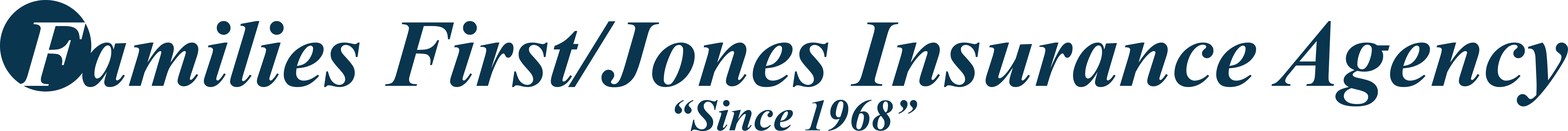
<style>
.page{position:relative;width:1568px;height:131px;background:#ffffff}
.page>*{position:absolute;margin:0}
.t1{font:95.3px/44.5px "TimesNewRomanPS-BoldItalicMT";color:#09354f}
.t2{font:95.3px/44.5px "TimesNewRomanPS-BoldItalicMT";color:#ffffff}
.t3{font:44.5px/44.5px "TimesNewRomanPS-BoldItalicMT";color:#09354f}
</style>
<div class="page">
<p class="t1" style="left:17px;top:21px;width:1551px;height:110px;text-align:center"><span class="t2">F</span>amilies First/Jones Insurance Agency<br><span class="t3">“Since 1968”</span></p>
</div>
